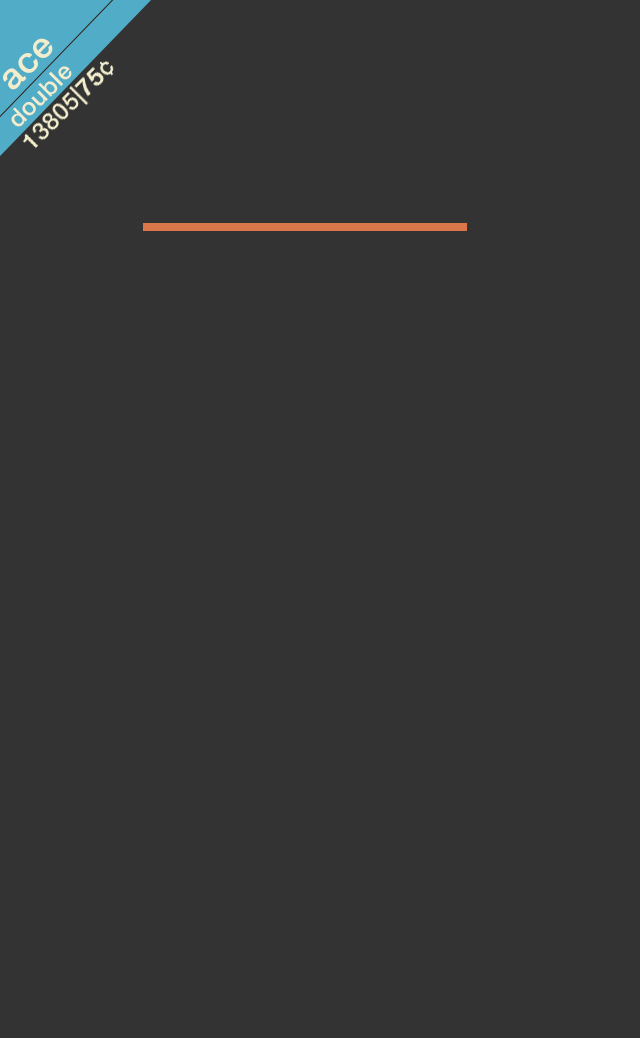
<style>
.page{position:relative;width:640px;height:1038px;background:#333333}
.page>*{position:absolute;margin:0}
.t1{font:36px "HelveticaNeue-Medium";letter-spacing:0.025em;color:#f2edcd}
.t2{font:24px "HelveticaNeue-Medium";letter-spacing:0.025em;color:#f2edcd}
</style>
<div class="page">
<p class="t1" style="left:3px;top:38px;width:50px;height:52px;rotate:-45deg">ace</p>
<p class="t2" style="left:11px;top:66px;width:61px;height:61px;rotate:-45deg">double</p>
</div>
